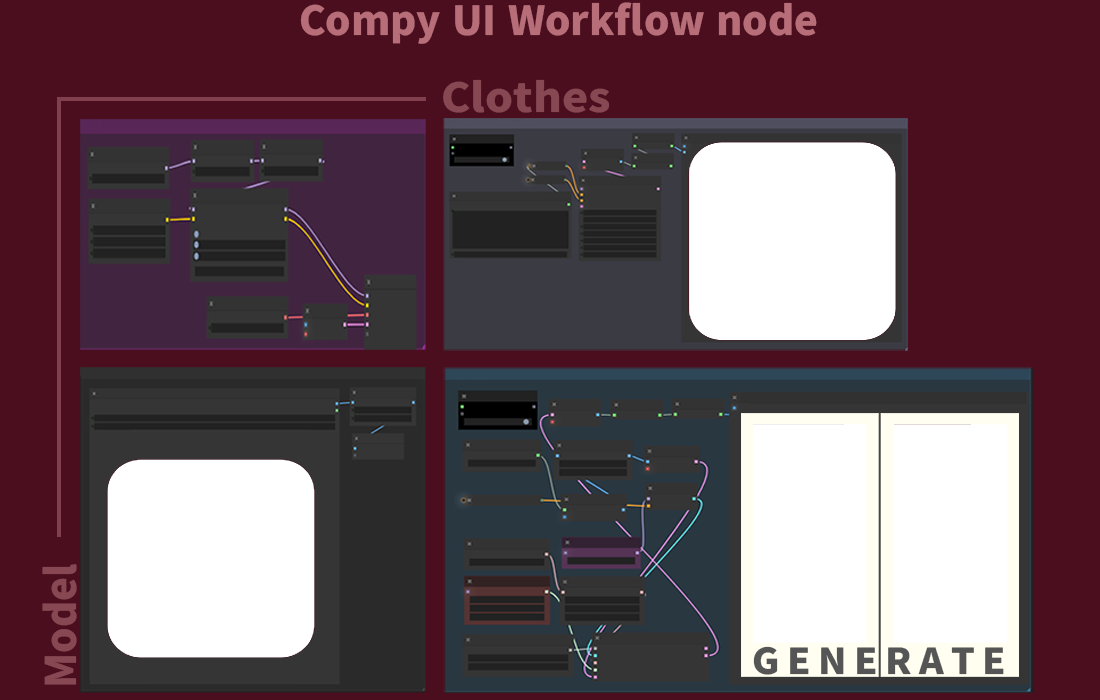
<style>
.page{position:relative;width:1100px;height:700px;background:#4b0e1e}
.page>*{position:absolute;margin:0}
.t1{font:40px "NotoSansKR-Black";color:#b76e79}
.t2{font:40px "NotoSansKR-Black";color:#884853;scale:1.1 1}
.t3{font:40px "NotoSansKR-Black";color:#884853;scale:1.05 1}
.t4{font:35.7px "NotoSansKR-Black";letter-spacing:0.2em;color:#555555;scale:1.05 1}
</style>
<div class="page">
<p class="t1" style="left:300px;top:2px;width:517px;height:42px">Compy UI Workflow node</p>
<p class="t2" style="left:443px;top:79px;width:167px;height:34px">Clothes</p>
<p class="t3" style="left:42px;top:564px;width:35px;height:121px;rotate:180deg">Model</p>
<p class="t4" style="left:753px;top:646px;width:251px;height:29px">GENERATE</p>
</div>
